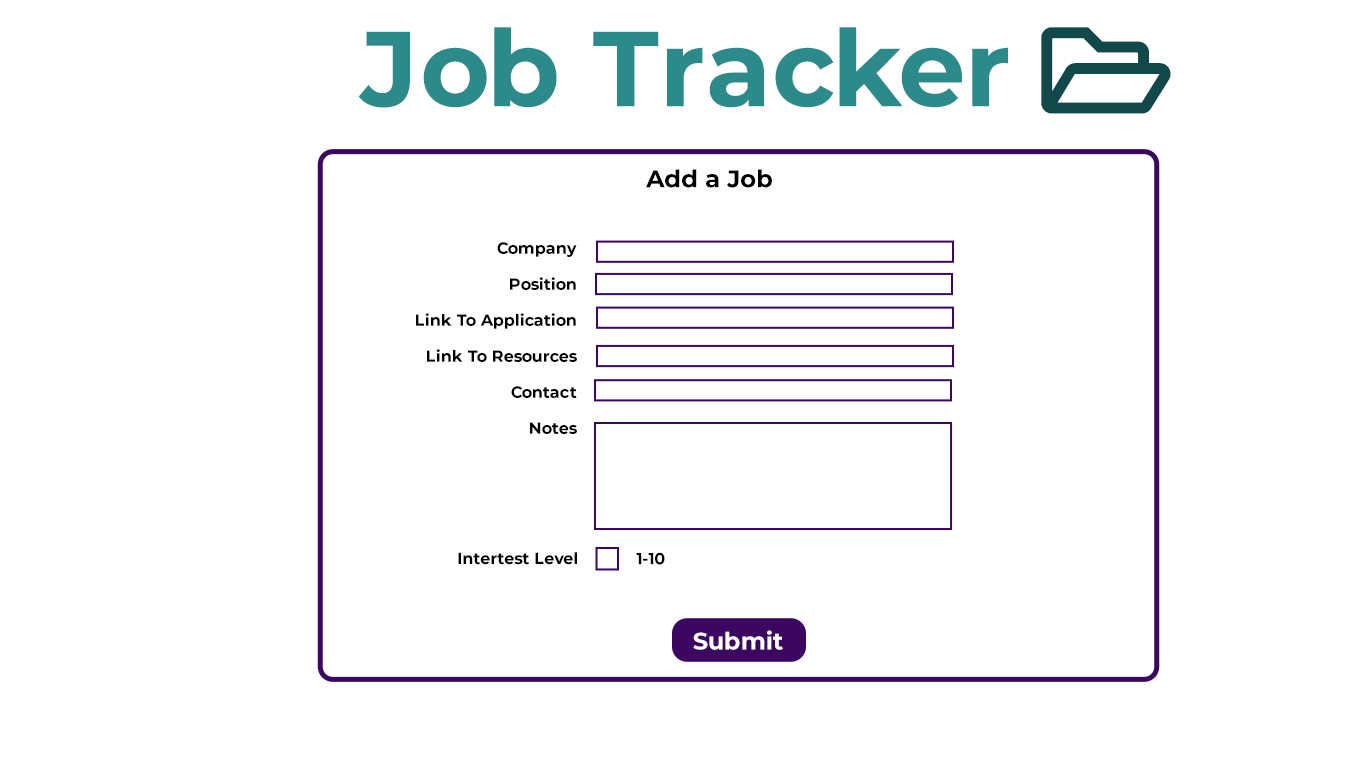
<style>
.page{position:relative;width:1366px;height:768px;background:#ffffff}
.page>*{position:absolute;margin:0}
.t1{font:106.2px "Montserrat-Bold";color:#2d8a8b}
.t2{font:24px "Montserrat-Bold";color:#000000}
.t3{font:16px/36px "Montserrat-Bold";color:#000000}
.t4{font:16px "Montserrat-Bold";color:#000000}
.t5{font:24px "Montserrat-Bold";color:#ffffff}
</style>
<div class="page">
<p class="t1" style="left:358px;top:27px;width:650px;height:81px">Job Tracker</p>
<p class="t2" style="left:646px;top:169px;width:126px;height:19px">Add a Job</p>
<p class="t3" style="left:416px;top:242px;width:161px;height:192px;text-align:right">Company<br>Position<br>Link To Application<br>Link To Resources<br>Contact<br>Notes</p>
<p class="t4" style="left:458px;top:552px;width:119px;height:13px">Intertest Level</p>
<p class="t4" style="left:636px;top:552px;width:29px;height:13px">1-10</p>
<p class="t5" style="left:693px;top:630px;width:90px;height:20px">Submit</p>
</div>
